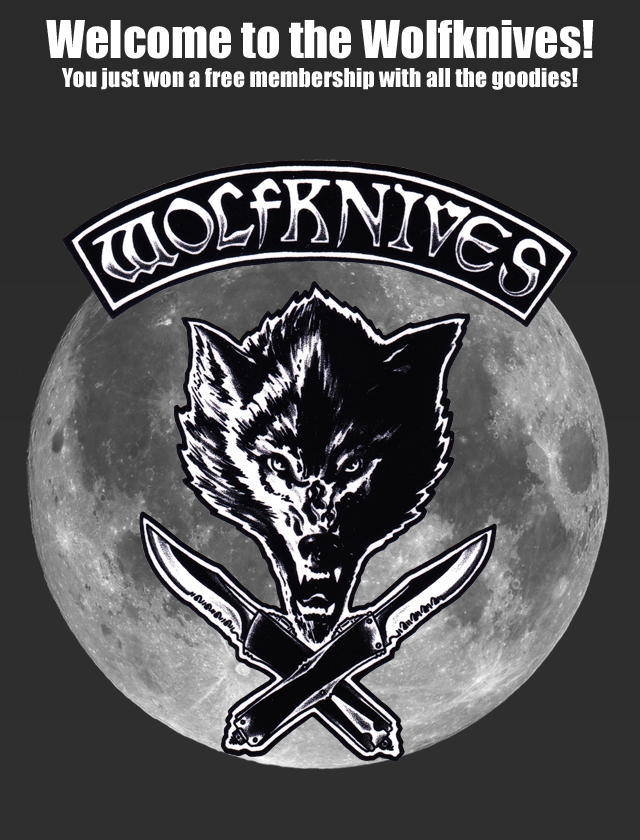
<style>
.page{position:relative;width:640px;height:840px}
.page>*{position:absolute;margin:0}
.t1{font:24px "Impact";color:#ffffff}
.t2{font:48px "Impact";color:#ffffff}
</style>
<div class="page">
<p class="t1" style="left:46px;top:20px;width:548px;height:70px;text-align:center"><span class="t2">Welcome to the Wolfknives!<br></span>You just won a free membership with all the goodies!</p>
</div>
